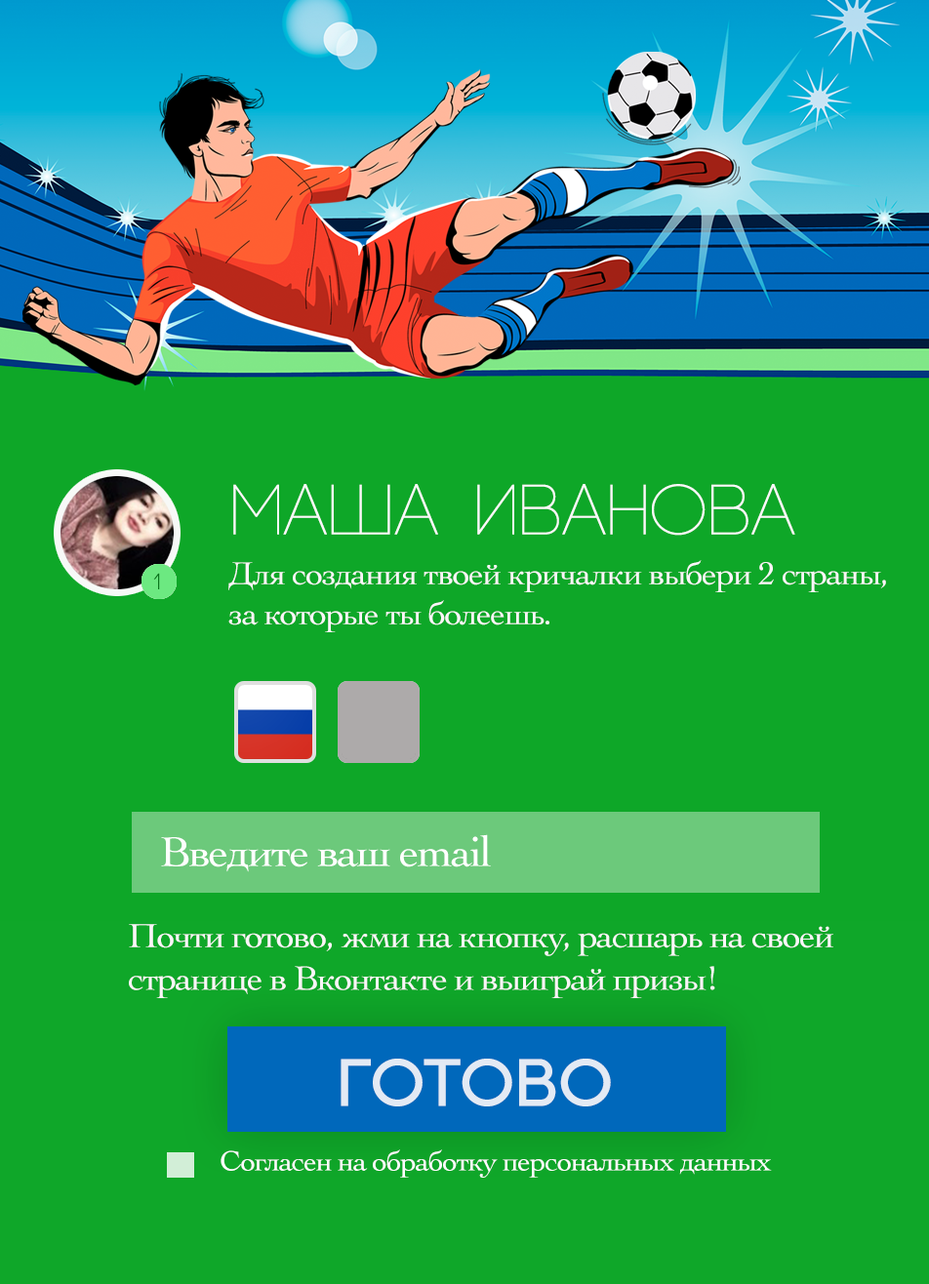
<style>
.page{position:relative;width:929px;height:1284px;background:#0ea728}
.page>*{position:absolute;margin:0}
.t1{font:70.5px "Code-Pro-Light";letter-spacing:-0.04em;color:#fbf9fa;font-weight:bold;scale:1.04 1}
.t2{font:33.4px "Cochin";letter-spacing:-0.04em;color:#faf6f8;scale:1.04 1}
.t3{font:22.5px "Code-Pro-Light";letter-spacing:-0.04em;color:#0a761c;font-weight:bold;scale:1.04 1}
.t4{font:43.6px "Cochin";letter-spacing:-0.04em;color:#ffffff;scale:1.04 1}
.t5{font:35.3px "Cochin";letter-spacing:-0.04em;color:#faf6f8;scale:1.04 1}
.t6{font:67.1px "Code-Pro";color:#e3eaf4;scale:1.04 1}
.t7{font:29px "Cochin";letter-spacing:-0.04em;color:#ffffff;scale:1.04 1}
</style>
<div class="page">
<p class="t1" style="left:233px;top:484px;width:562px;height:52px">МАША  иванова</p>
<p class="t2" style="left:228px;top:560px;width:658px;height:72px">Для создания твоей кричалки выбери 2 страны, <br>за которые ты болеешь.</p>
<p class="t3" style="left:153px;top:573px;width:7px;height:16px">1</p>
<p class="t4" style="left:161px;top:834px;width:330px;height:38px">Введите ваш email</p>
<p class="t5" style="left:129px;top:924px;width:704px;height:74px">Почти готово, жми на кнопку, расшарь на своей странице в Вконтакте и выиграй призы!</p>
<p class="t6" style="left:340px;top:1059px;width:271px;height:47px">готово</p>
<p class="t7" style="left:220px;top:1149px;width:552px;height:29px">Согласен на обработку персональных данных</p>
</div>
